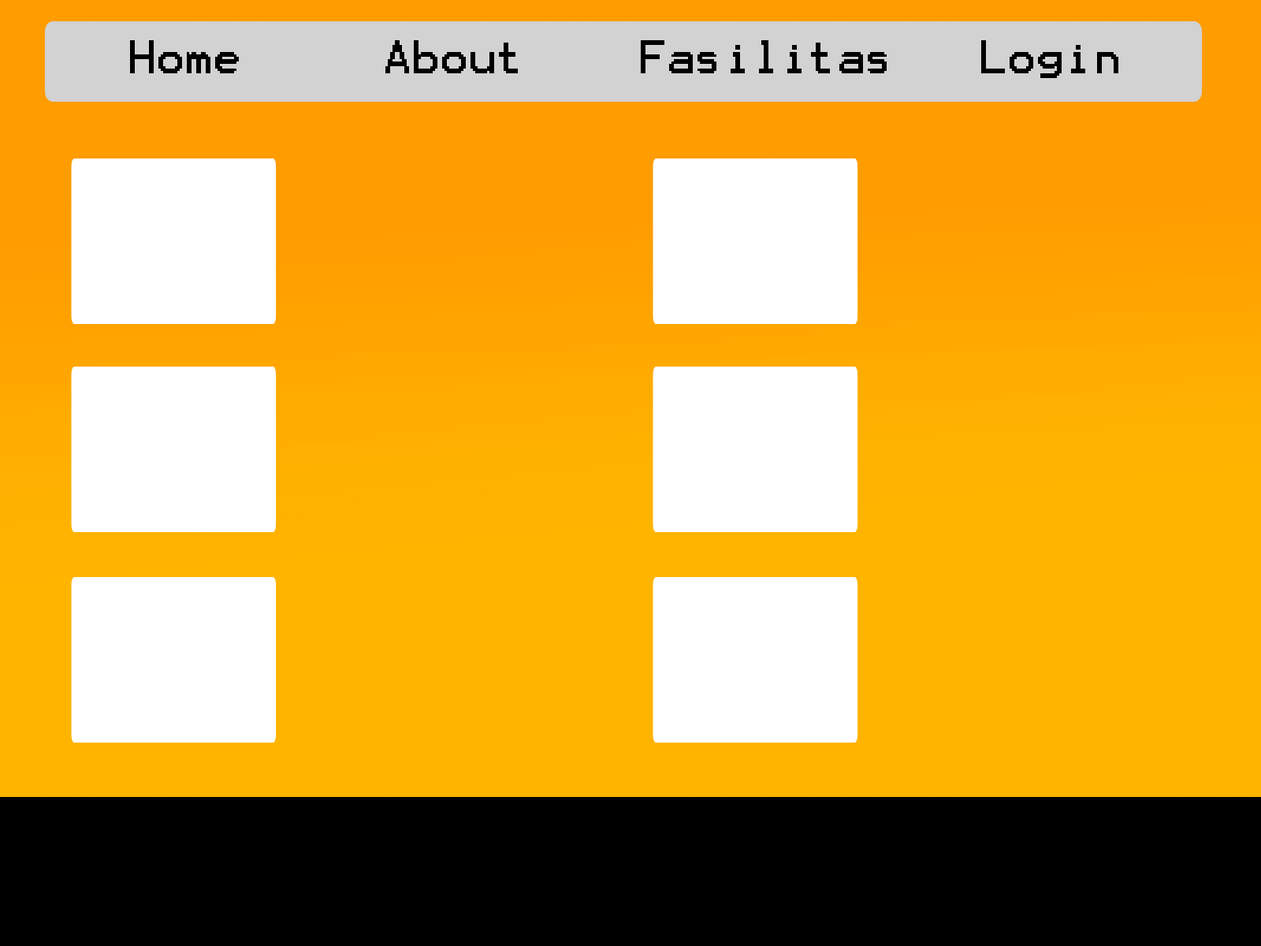
<style>
.page{position:relative;width:1261px;height:946px;background:#ffb400}
.page>*{position:absolute;margin:0}
.t1{font:37.8px "Terminal";color:#000000}
</style>
<div class="page">
<p class="t1" style="left:130px;top:40px;width:988px;height:38px">Home     About    Fasilitas   Login</p>
</div>
